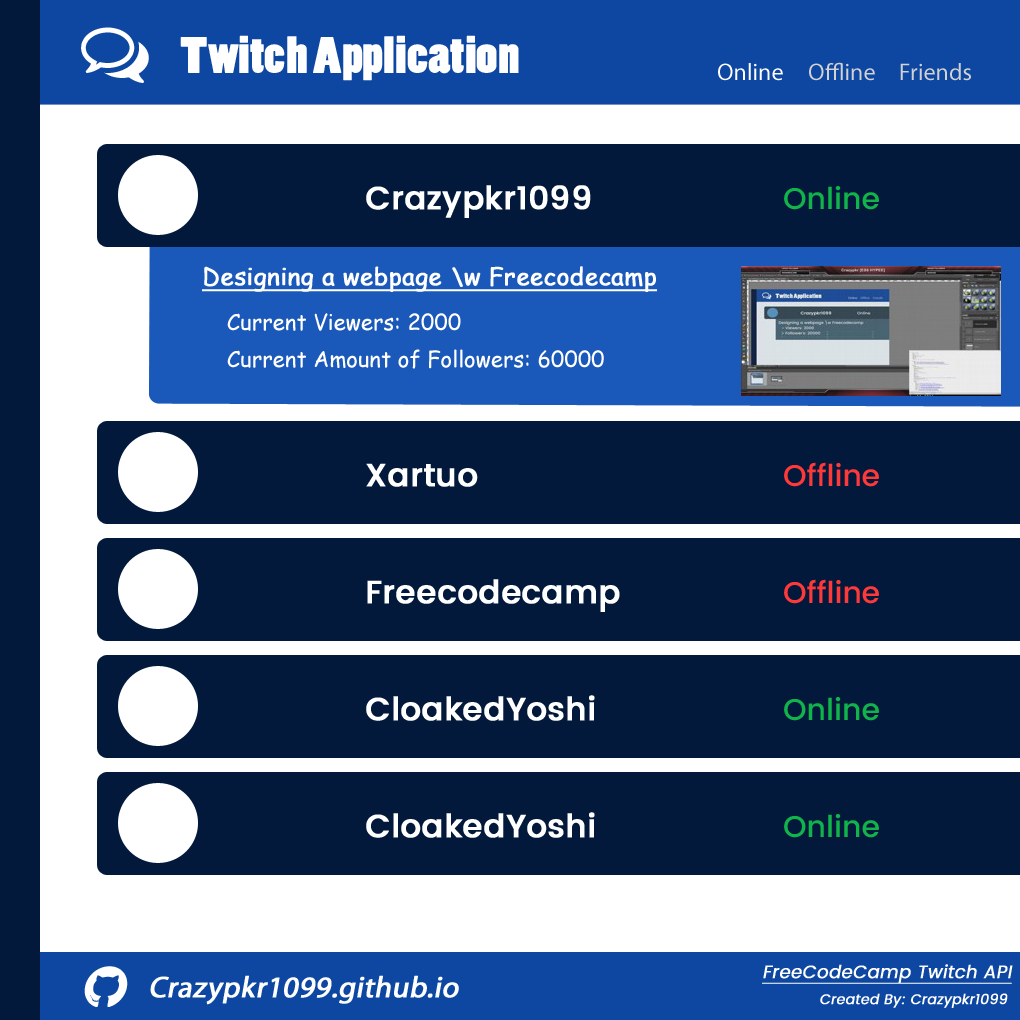
<style>
.page{position:relative;width:1020px;height:1020px;background:#03193b}
.page>*{position:absolute;margin:0}
.t1{font:48px "PoplarStd";color:#ffffff;scale:1.2 1}
.t2{font:24px "MyriadPro-Regular";color:#ffffff}
.t3{font:24px "MyriadPro-Regular";color:#d2d2d2}
.t4{font:32px "Poppins-Medium";color:#ffffff;font-weight:bold}
.t5{font:30px "Poppins-Medium";color:#11b44a}
.t6{font:24px "ComicSansMS";color:#ffffff;font-weight:bold;text-decoration:underline}
.t7{font:22px "ComicSansMS";color:#ffffff}
.t8{font:30px "Poppins-Medium";color:#fd3939}
.t9{font:18px "Poppins-Regular";color:#ffffff;font-weight:bold;font-style:italic;text-decoration:underline}
.t10{font:30px "MyriadPro-Regular";color:#ffffff;font-weight:bold;font-style:italic}
.t11{font:14px "Poppins-Regular";color:#ffffff;font-weight:bold;font-style:italic}
</style>
<div class="page">
<p class="t1" style="left:180px;top:35px;width:339px;height:46px">Twitch Application</p>
<p class="t2" style="left:718px;top:63px;width:65px;height:18px">Online</p>
<p class="t3" style="left:809px;top:62px;width:66px;height:19px">Offline</p>
<p class="t3" style="left:900px;top:63px;width:71px;height:18px">Friends</p>
<p class="t4" style="left:366px;top:185px;width:225px;height:33px">Crazypkr1099</p>
<p class="t5" style="left:784px;top:186px;width:95px;height:24px">Online</p>
<p class="t6" style="left:202px;top:266px;width:455px;height:26px">Designing a webpage \w Freecodecamp</p>
<p class="t7" style="left:227px;top:313px;width:234px;height:18px">Current Viewers: 2000</p>
<p class="t7" style="left:227px;top:349px;width:377px;height:20px">Current Amount of Followers: 60000</p>
<p class="t8" style="left:784px;top:462px;width:95px;height:25px">Offline</p>
<p class="t4" style="left:366px;top:463px;width:112px;height:24px">Xartuo</p>
<p class="t4" style="left:367px;top:579px;width:253px;height:33px">Freecodecamp</p>
<p class="t8" style="left:784px;top:579px;width:95px;height:25px">Offline</p>
<p class="t4" style="left:366px;top:695px;width:229px;height:26px">CloakedYoshi</p>
<p class="t5" style="left:784px;top:697px;width:95px;height:24px">Online</p>
<p class="t4" style="left:366px;top:812px;width:229px;height:26px">CloakedYoshi</p>
<p class="t5" style="left:784px;top:814px;width:95px;height:24px">Online</p>
<p class="t9" style="left:762px;top:964px;width:251px;height:20px">FreeCodeCamp Twitch API</p>
<p class="t10" style="left:150px;top:975px;width:309px;height:30px">Crazypkr1099.github.io</p>
<p class="t11" style="left:820px;top:993px;width:188px;height:15px">Created By: Crazypkr1099</p>
</div>
